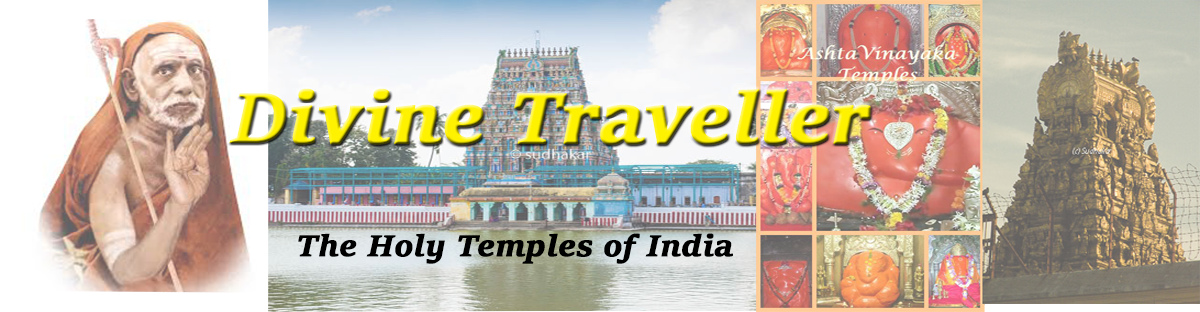
<style>
.page{position:relative;width:1200px;height:312px}
.page>*{position:absolute;margin:0}
.t1{font:78px "SitkaText-BoldItalic";font-weight:bold}
.t2{font:78px "SitkaText-BoldItalic"}
.t3{font:32.5px "SitkaText-BoldItalic";color:#000000;font-weight:bold}
</style>
<div class="page">
<p class="t1" style="left:229px;top:88px;width:642px;height:57px"><span class="t2">D</span>ivine Traveller</p>
<p class="t3" style="left:298px;top:233px;width:435px;height:31px">The Holy Temples of India</p>
</div>
